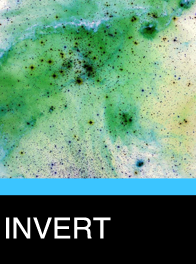
<style>
.page{position:relative;width:196px;height:264px;background:#000000}
.page>*{position:absolute;margin:0}
.t1{font:28.9px "Helvetica";color:#ffffff}
</style>
<div class="page">
<p class="t1" style="left:6px;top:217px;width:105px;height:22px">INVERT</p>
</div>
